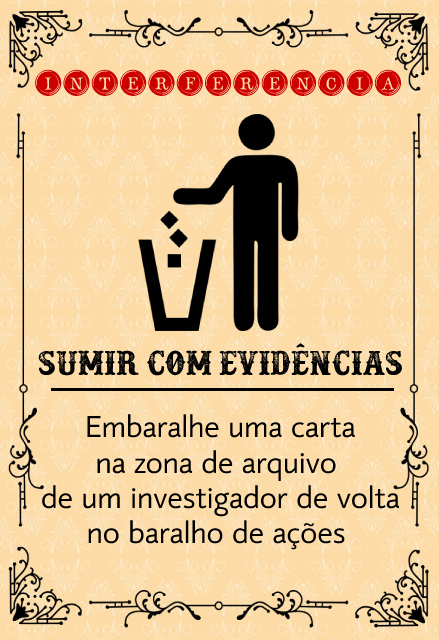
<style>
.page{position:relative;width:439px;height:640px;background:#fcdba6}
.page>*{position:absolute;margin:0}
.t1{font:35px "TypeKeysFilled";color:#cd0000}
.t2{font:38.4px "Docktrin";color:#000000}
.t3{font:29.5px "mirror82";color:#000000}
</style>
<div class="page">
<p class="t1" style="left:35px;top:69px;width:367px;height:27px">interferencia</p>
<p class="t2" style="left:38px;top:343px;width:364px;height:33px">Sumir com evidências</p>
<p class="t3" style="left:42px;top:414px;width:357px;height:136px;text-align:center">Embaralhe uma carta<br>na zona de arquivo <br>de um investigador de volta<br>no baralho de ações</p>
</div>
